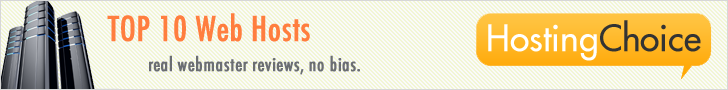
<style>
.page{position:relative;width:728px;height:90px;background:#f2f6d4}
.page>*{position:absolute;margin:0}
.t1{font:33.3px "Futura-CondensedMedium";letter-spacing:-0.005em;color:#ff7e3f;font-weight:bold}
.t2{font:33.3px "Futura-CondensedMedium";letter-spacing:-0.005em;color:#ff7e3f;text-transform:uppercase;font-weight:bold}
.t3{font:18.3px "Futura-CondensedMedium";letter-spacing:0.015em;color:#6b6e73;font-weight:bold}
</style>
<div class="page">
<p class="t1" style="left:107px;top:13px;width:203px;height:29px"><span class="t2">Top</span> 10 Web Hosts</p>
<p class="t3" style="left:149px;top:55px;width:211px;height:20px">real webmaster reviews, no bias.</p>
</div>
